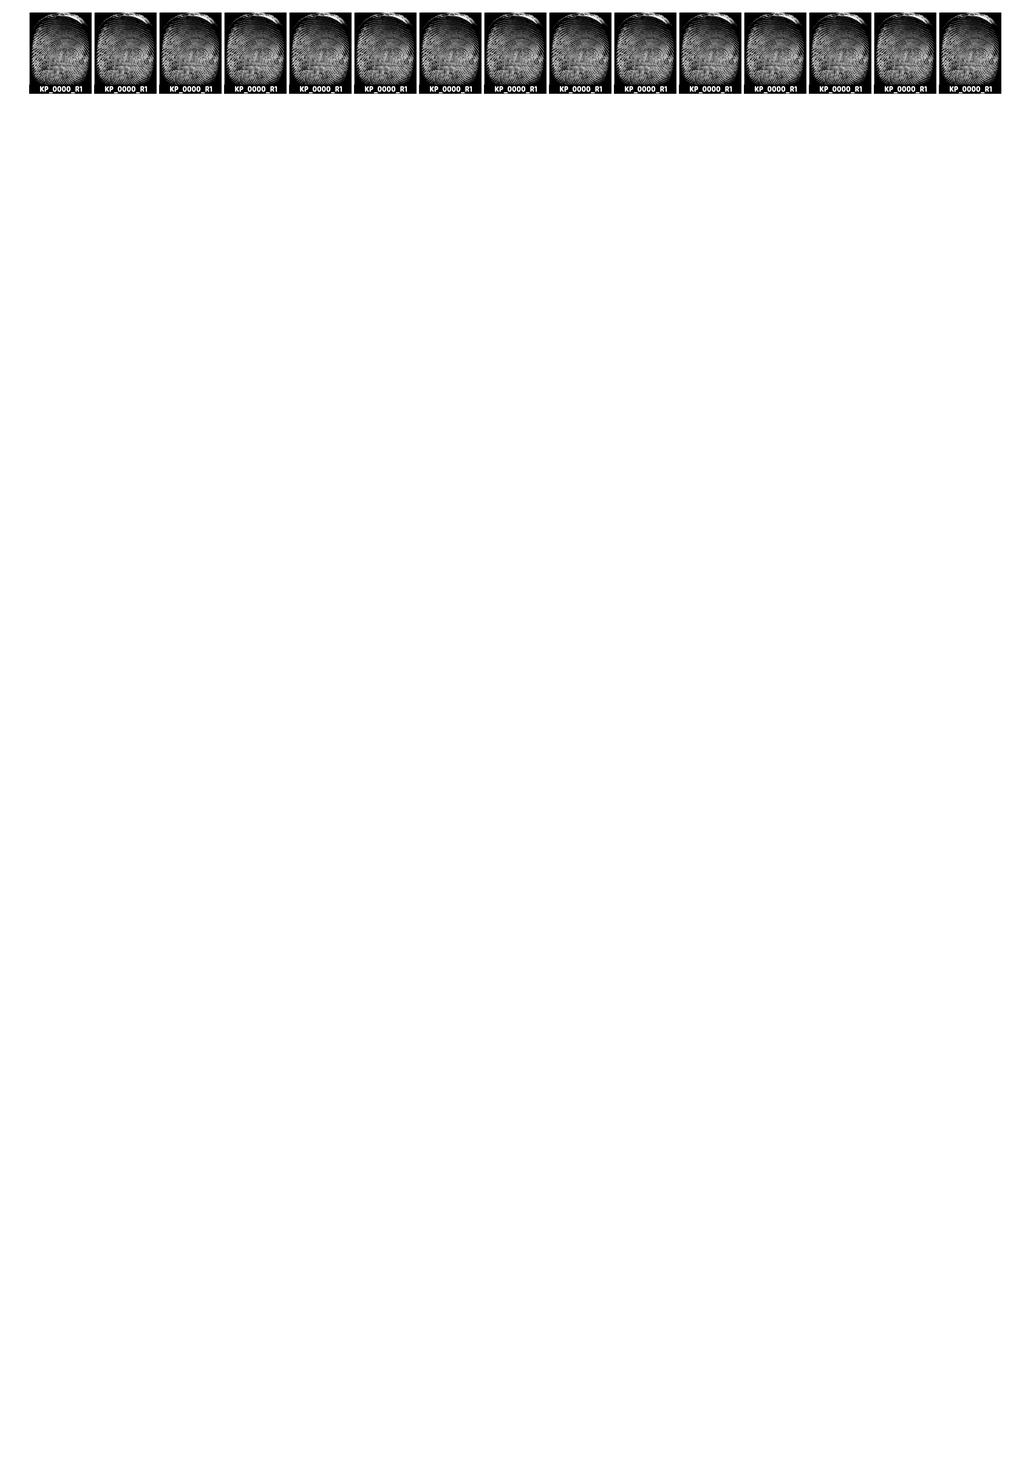
<style>
.page{position:relative;width:1033px;height:1462px;background:#ffffff}
.page>*{position:absolute;margin:0}
.t1{font:9px "Baloo";color:#ffffff;scale:0.83 1}
</style>
<div class="page">
<p class="t1" style="left:40px;top:86px;width:42px;height:8px">KP_0000_R1</p>
<p class="t1" style="left:105px;top:86px;width:42px;height:8px">KP_0000_R1</p>
<p class="t1" style="left:170px;top:86px;width:42px;height:8px">KP_0000_R1</p>
<p class="t1" style="left:235px;top:86px;width:42px;height:8px">KP_0000_R1</p>
<p class="t1" style="left:300px;top:86px;width:42px;height:8px">KP_0000_R1</p>
<p class="t1" style="left:365px;top:86px;width:42px;height:8px">KP_0000_R1</p>
<p class="t1" style="left:430px;top:86px;width:42px;height:8px">KP_0000_R1</p>
<p class="t1" style="left:495px;top:86px;width:42px;height:8px">KP_0000_R1</p>
<p class="t1" style="left:560px;top:86px;width:42px;height:8px">KP_0000_R1</p>
<p class="t1" style="left:625px;top:86px;width:42px;height:8px">KP_0000_R1</p>
<p class="t1" style="left:690px;top:86px;width:42px;height:8px">KP_0000_R1</p>
<p class="t1" style="left:755px;top:86px;width:42px;height:8px">KP_0000_R1</p>
<p class="t1" style="left:820px;top:86px;width:42px;height:8px">KP_0000_R1</p>
<p class="t1" style="left:885px;top:86px;width:42px;height:8px">KP_0000_R1</p>
<p class="t1" style="left:950px;top:86px;width:42px;height:8px">KP_0000_R1</p>
</div>
